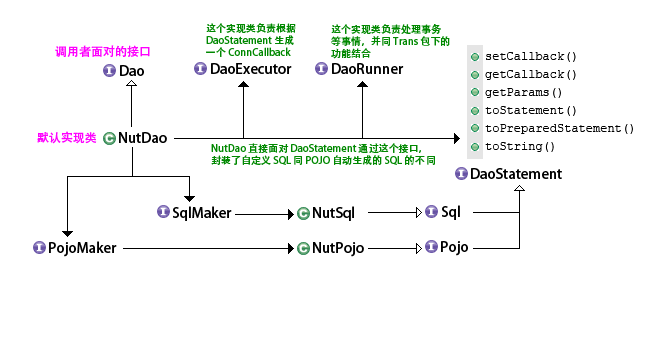
<style>
.page{position:relative;width:646px;height:359px;background:#ffffff}
.page>*{position:absolute;margin:0}
.t1{font:10px/12px "AdobeHeitiStd-Regular";color:#008800}
.t2{font:12px "AdobeHeitiStd-Regular";color:#ff00ff}
.t3{font:12px/18px "CourierNewPSMT";color:#000000}
.t4{font:14px "AdobeHeitiStd-Regular";color:#000000}
</style>
<div class="page">
<p class="t1" style="left:206px;top:23px;width:90px;height:34px">这个实现类负责根据<br>DaoStatement 生成<br>一个 ConnCallback</p>
<p class="t1" style="left:331px;top:24px;width:119px;height:35px">这个实现类负责处理事务<br>等事情，并同 Trans 包下的<br>功能结合</p>
<p class="t2" style="left:55px;top:45px;width:95px;height:12px">调用者面对的接口</p>
<p class="t3" style="left:485px;top:52px;width:148px;height:100px">setCallback()<br>getCallback()<br>getParams()<br>toStatement()<br>toPreparedStatement()<br>toString()</p>
<p class="t4" style="left:120px;top:65px;width:24px;height:11px">Dao</p>
<p class="t4" style="left:211px;top:63px;width:81px;height:11px">DaoExecutor</p>
<p class="t4" style="left:332px;top:63px;width:72px;height:11px">DaoRunner</p>
<p class="t2" style="left:37px;top:131px;width:60px;height:13px">默认实现类</p>
<p class="t4" style="left:119px;top:132px;width:48px;height:11px">NutDao</p>
<p class="t1" style="left:211px;top:143px;width:224px;height:22px">NutDao 直接面对 DaoStatement 通过这个接口，<br>封装了自定义 SQL 同 POJO 自动生成的 SQL 的不 同</p>
<p class="t4" style="left:471px;top:168px;width:91px;height:11px">DaoStatement</p>
<p class="t4" style="left:173px;top:206px;width:59px;height:15px">SqlMaker</p>
<p class="t4" style="left:313px;top:206px;width:41px;height:15px">NutSql</p>
<p class="t4" style="left:442px;top:205px;width:18px;height:15px">Sql</p>
<p class="t4" style="left:49px;top:241px;width:68px;height:16px">PojoMaker</p>
<p class="t4" style="left:313px;top:242px;width:51px;height:15px">NutPojo</p>
<p class="t4" style="left:441px;top:241px;width:27px;height:15px">Pojo</p>
</div>
